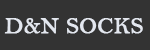
<style>
.page{position:relative;width:150px;height:50px;background:#333333}
.page>*{position:absolute;margin:0}
.t1{font:24px "BellMT";color:#e3e7ef;text-transform:uppercase;font-weight:bold}
</style>
<div class="page">
<p class="t1" style="left:4px;top:18px;width:139px;height:16px">D&amp;N Socks</p>
</div>
